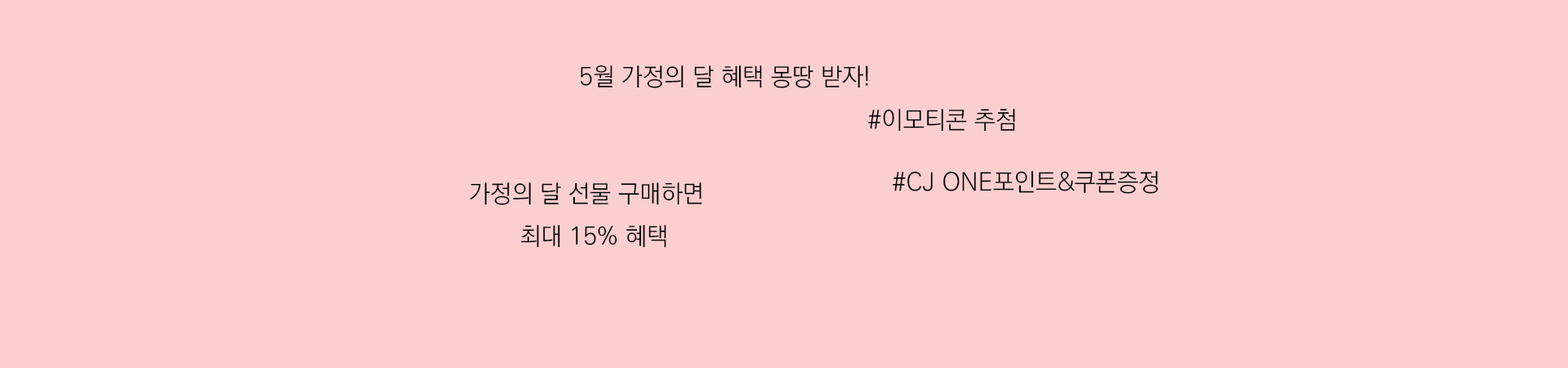
<style>
.page{position:relative;width:1568px;height:368px;background:#fbcfd0}
.page>*{position:absolute;margin:0}
.t1{font:24.5px "KoPubWorldDotumLight";color:#000403}
</style>
<div class="page">
<p class="t1" style="left:580px;top:65px;width:288px;height:23px">5월 가정의 달 혜택 몽땅 받자!</p>
<p class="t1" style="left:868px;top:109px;width:147px;height:22px">#이모티콘 추첨</p>
<p class="t1" style="left:893px;top:171px;width:265px;height:23px">#CJ ONE포인트&amp;쿠폰증정</p>
<p class="t1" style="left:470px;top:182px;width:232px;height:23px">가정의 달 선물 구매하면</p>
<p class="t1" style="left:521px;top:225px;width:145px;height:22px">최대 15% 혜택</p>
</div>
